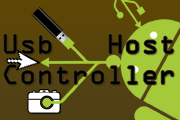
<style>
.page{position:relative;width:180px;height:120px}
.page>*{position:absolute;margin:0}
.t1{font:24.3px "OCRAStd";color:#000000}
</style>
<div class="page">
<p class="t1" style="left:4px;top:34px;width:170px;height:50px;text-align:center">Usb   Host<br>Controller</p>
</div>
